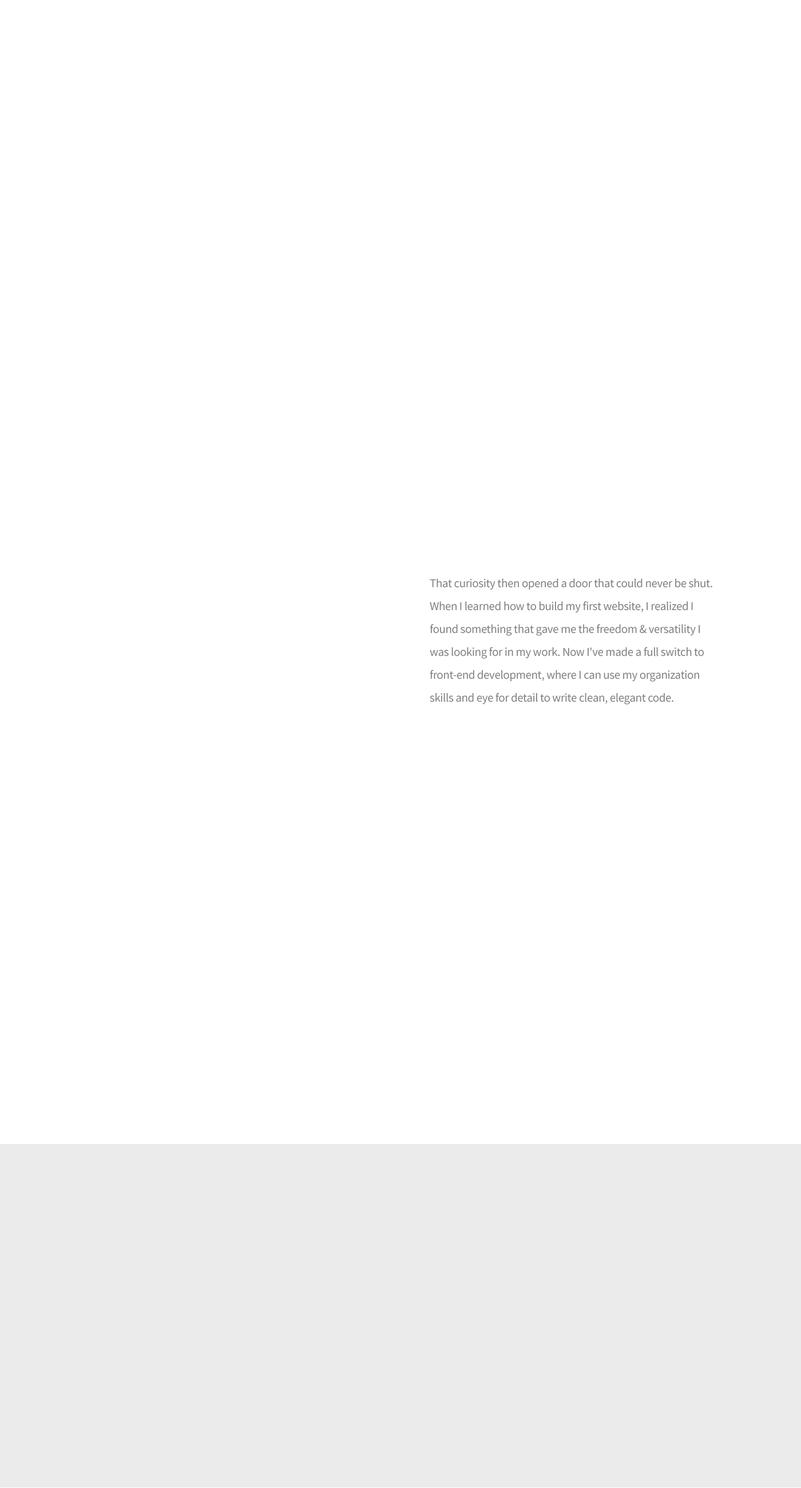
<style>
.page{position:relative;width:801px;height:1488px;background:#ffffff}
.page>*{position:absolute;margin:0}
.t1{font:12px/22.9px "SourceSansPro-Regular";letter-spacing:-0.02em;color:#7f7f7f}
</style>
<div class="page">
<p class="t1" style="left:430px;top:579px;width:283px;height:126px">That curiosity then opened a door that could never be shut. When I learned how to build my first website, I realized I found something that gave me the freedom &amp; versatility I was looking for in my work. Now I've made a full switch to front-end development, where I can use my organization skills and eye for detail to write clean, elegant code.</p>
</div>
